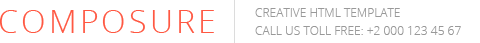
<style>
.page{position:relative;width:480px;height:43px;background:#ffffff}
.page>*{position:absolute;margin:0}
.t1{font:32px "OpenSans-Light";letter-spacing:0.1em;color:#ff5842;text-transform:uppercase}
.t2{font:12px "OpenSans-Light";color:#999999;text-transform:uppercase}
</style>
<div class="page">
<p class="t1" style="left:0px;top:10px;width:214px;height:23px">composure</p>
<p class="t2" style="left:255px;top:8px;width:145px;height:9px">Creative Html template</p>
<p class="t2" style="left:255px;top:26px;width:206px;height:9px">Call us toll free: +2 000 123 45 67</p>
</div>
